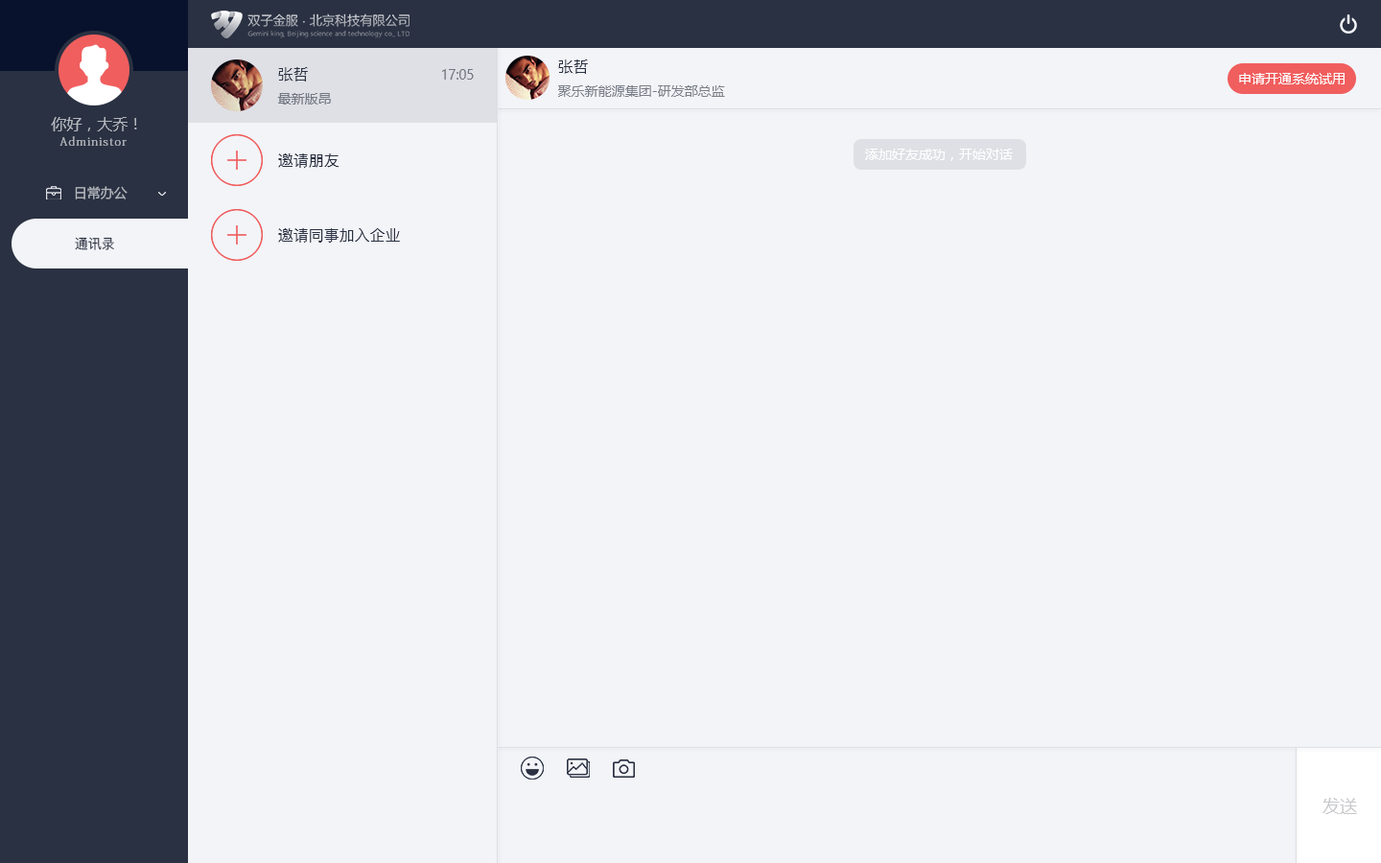
<style>
.page{position:relative;width:1381px;height:863px;background:#f2f4f8}
.page>*{position:absolute;margin:0}
.t1{font:15.3px "PingFang-SC-Medium";color:#2a3142}
.t2{font:13.4px "MicrosoftYaHeiUI";color:#7b7f88}
.t3{font:13.4px "MicrosoftYaHeiUI";color:#ffffff}
.t4{font:15.3px "MicrosoftYaHeiMono";color:#b4b7bd}
.t5{font:11.5px "AdobeFangsongStd-Regular";letter-spacing:0.1em;color:#b4b7bd}
.t6{font:13.4px "MicrosoftYaHeiUI";color:#b4b7bd}
.t7{font:13.4px "PingFang-SC-Medium";color:#2a3142}
.t8{font:17.3px "MicrosoftYaHeiUI";color:#c7c8ca}
</style>
<div class="page">
<p class="t1" style="left:558px;top:59px;width:30px;height:15px">张哲</p>
<p class="t1" style="left:278px;top:67px;width:30px;height:15px">张哲</p>
<p class="t2" style="left:442px;top:69px;width:32px;height:11px">17:05</p>
<p class="t3" style="left:1239px;top:73px;width:106px;height:11px">申请开通系统试用</p>
<p class="t2" style="left:558px;top:85px;width:167px;height:12px">聚乐新能源集团-研发部总监</p>
<p class="t2" style="left:277px;top:93px;width:54px;height:12px">最新版昂</p>
<p class="t4" style="left:51px;top:117px;width:86px;height:14px">你好，大乔！</p>
<p class="t5" style="left:59px;top:136px;width:68px;height:10px">Administor</p>
<p class="t3" style="left:865px;top:149px;width:148px;height:12px">添加好友成功，开始对话</p>
<p class="t1" style="left:278px;top:153px;width:61px;height:15px">邀请朋友</p>
<p class="t6" style="left:75px;top:186px;width:53px;height:14px">日常办公</p>
<p class="t1" style="left:278px;top:228px;width:122px;height:15px">邀请同事加入企业</p>
<p class="t7" style="left:75px;top:237px;width:39px;height:13px">通讯录</p>
<p class="t8" style="left:1323px;top:798px;width:34px;height:16px">发送</p>
</div>
